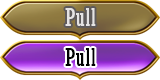
<style>
.page{position:relative;width:160px;height:80px}
.page>*{position:absolute;margin:0}
.t1{font:24px "Rockwell-Condensed";letter-spacing:0.025em;color:#e5e3e3}
.t2{font:24px "Rockwell-Condensed";letter-spacing:0.025em;color:#000000}
</style>
<div class="page">
<p class="t1" style="left:65px;top:8px;width:31px;height:18px">Pull</p>
<p class="t2" style="left:65px;top:48px;width:31px;height:18px">Pull</p>
</div>
